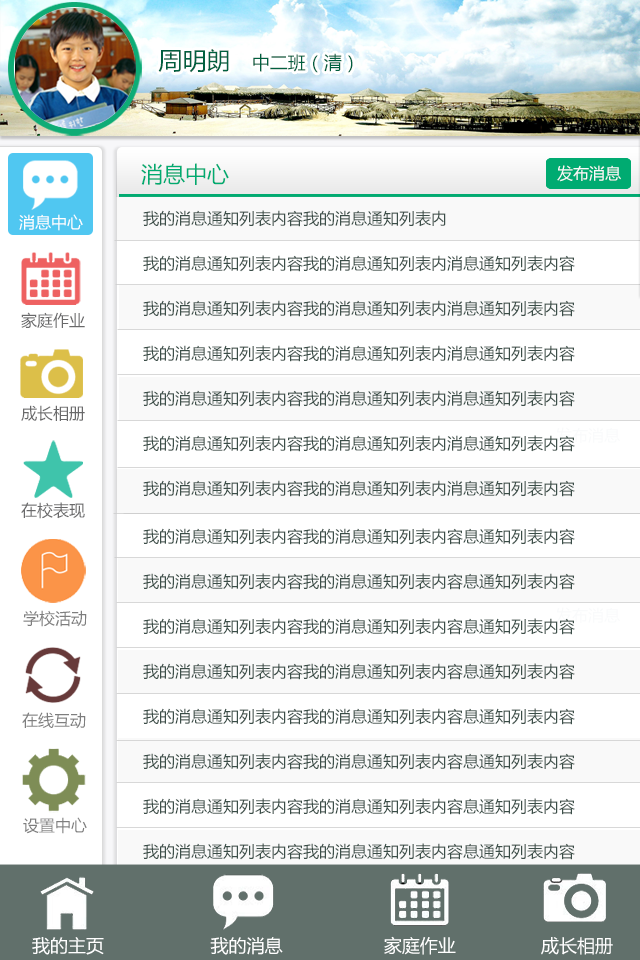
<style>
.page{position:relative;width:640px;height:960px;background:#ffffff}
.page>*{position:absolute;margin:0}
.t1{font:18px "MicrosoftYaHei";color:#005f3f}
.t2{font:24px "MicrosoftYaHei";color:#005f3f}
.t3{font:22px "MicrosoftYaHei";color:#00ab71}
.t4{font:16px "MicrosoftYaHei";color:#f9fafb}
.t5{font:16px "MicrosoftYaHei";color:#ffffff}
.t6{font:16px/45px "MicrosoftYaHei";color:#3b4e48}
.t7{font:16px "MicrosoftYaHei";color:#69696a}
.t8{font:16px "MicrosoftYaHei";color:#7e7e7e}
.t9{font:18px "MicrosoftYaHei";color:#ffffff}
</style>
<div class="page">
<p class="t1" style="left:158px;top:49px;width:195px;height:24px"><span class="t2">    周明朗</span>    中二班（清）</p>
<p class="t3" style="left:141px;top:163px;width:88px;height:22px">消息中心</p>
<p class="t4" style="left:557px;top:165px;width:64px;height:17px">发布消息</p>
<p class="t5" style="left:19px;top:214px;width:64px;height:17px">消息中心</p>
<p class="t6" style="left:143px;top:210px;width:432px;height:287px">我的消息通知列表内容我的消息通知列表内<br>我的消息通知列表内容我的消息通知列表内消息通知列表内容<br>我的消息通知列表内容我的消息通知列表内消息通知列表内容<br>我的消息通知列表内容我的消息通知列表内消息通知列表内容<br>我的消息通知列表内容我的消息通知列表内消息通知列表内容<br>我的消息通知列表内容我的消息通知列表内消息通知列表内容<br>我的消息通知列表内容我的消息通知列表内消息通知列表内容</p>
<p class="t7" style="left:21px;top:312px;width:64px;height:16px">家庭作业</p>
<p class="t7" style="left:21px;top:405px;width:64px;height:16px">成长相册</p>
<p class="t7" style="left:21px;top:502px;width:64px;height:17px">在校表现</p>
<p class="t6" style="left:143px;top:528px;width:432px;height:197px">我的消息通知列表内容我的消息通知列表内容息通知列表内容<br>我的消息通知列表内容我的消息通知列表内容息通知列表内容<br>我的消息通知列表内容我的消息通知列表内容息通知列表内容<br>我的消息通知列表内容我的消息通知列表内容息通知列表内容<br>我的消息通知列表内容我的消息通知列表内容息通知列表内容</p>
<p class="t8" style="left:23px;top:610px;width:64px;height:17px">学校活动</p>
<p class="t8" style="left:22px;top:712px;width:64px;height:17px">在线互动</p>
<p class="t6" style="left:143px;top:753px;width:432px;height:152px">我的消息通知列表内容我的消息通知列表内容息通知列表内容<br>我的消息通知列表内容我的消息通知列表内容息通知列表内容<br>我的消息通知列表内容我的消息通知列表内容息通知列表内容<br>我的消息通知列表内容我的消息通知列表内容息通知列表内容</p>
<p class="t8" style="left:23px;top:817px;width:64px;height:17px">设置中心</p>
<p class="t9" style="left:32px;top:936px;width:581px;height:19px">我的主页                    我的消息                   家庭作业                成长相册</p>
</div>
